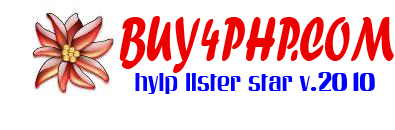
<style>
.page{position:relative;width:395px;height:130px;background:#ffffff}
.page>*{position:absolute;margin:0}
.t1{font:65px "ForteMT";color:#ed0000;scale:0.63 1}
.t2{font:24.7px "GalaxyRegularSWFTE";color:#0000ff;scale:0.87 1}
</style>
<div class="page">
<p class="t1" style="left:119px;top:16px;width:275px;height:57px">BUY4PHP.COM</p>
<p class="t2" style="left:135px;top:72px;width:240px;height:22px">hyip lister star v.2010</p>
</div>
